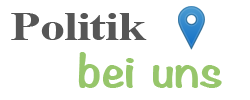
<style>
.page{position:relative;width:250px;height:100px;background:#ffffff}
.page>*{position:absolute;margin:0}
.t1{font:40px "TimesNewRomanPS-BoldMT";letter-spacing:-0.02em;color:#565656;scale:1.25 1}
.t2{font:40px "Noteworthy-Bold";letter-spacing:-0.02em;color:#97c66b;scale:1.25 1}
</style>
<div class="page">
<p class="t1" style="left:11px;top:13px;width:136px;height:27px">Politik</p>
<p class="t2" style="left:78px;top:52px;width:56px;height:36px">bei</p>
<p class="t2" style="left:153px;top:65px;width:69px;height:23px">uns</p>
</div>
